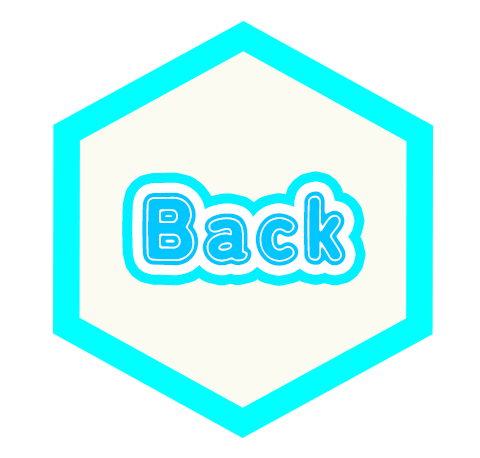
<style>
.page{position:relative;width:480px;height:458px;background:#ffffff}
.page>*{position:absolute;margin:0}
.t1{font:100px "DokiDokiFantasia";color:#01c6ff}
</style>
<div class="page">
<p class="t1" style="left:142px;top:191px;width:204px;height:75px">Back</p>
</div>
